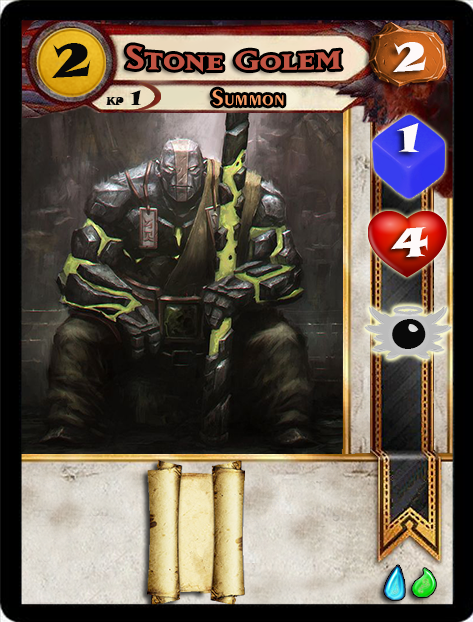
<style>
.page{position:relative;width:473px;height:622px}
.page>*{position:absolute;margin:0}
.t1{font:46.6px "SnapITC-Regular";color:#090909;scale:1.05 1}
.t2{font:40px "MatrixBoldSmallCaps";color:#c25443;scale:1.06 1}
.t3{font:40px "SnapITC-Regular";color:#fef9f9;scale:1.05 1}
.t4{font:22.7px "Exotic350BT-DemiBold";color:#f89c64;scale:1.06 1}
.t5{font:20.5px "SnapITC-Regular";color:#090909}
.t6{font:40px "SnapITC-Regular";color:#090909;scale:1.05 1}
</style>
<div class="page">
<p class="t1" style="left:51px;top:43px;width:40px;height:35px">2</p>
<p class="t2" style="left:126px;top:45px;width:215px;height:27px">Stone Golem</p>
<p class="t3" style="left:393px;top:42px;width:34px;height:30px">2</p>
<p class="t4" style="left:212px;top:89px;width:72px;height:17px">Summon</p>
<p class="t5" style="left:130px;top:90px;width:11px;height:15px">1</p>
<p class="t3" style="left:397px;top:123px;width:22px;height:29px">1</p>
<p class="t3" style="left:391px;top:227px;width:37px;height:30px">4</p>
<p class="t6" style="left:392px;top:319px;width:34px;height:30px">0</p>
</div>
